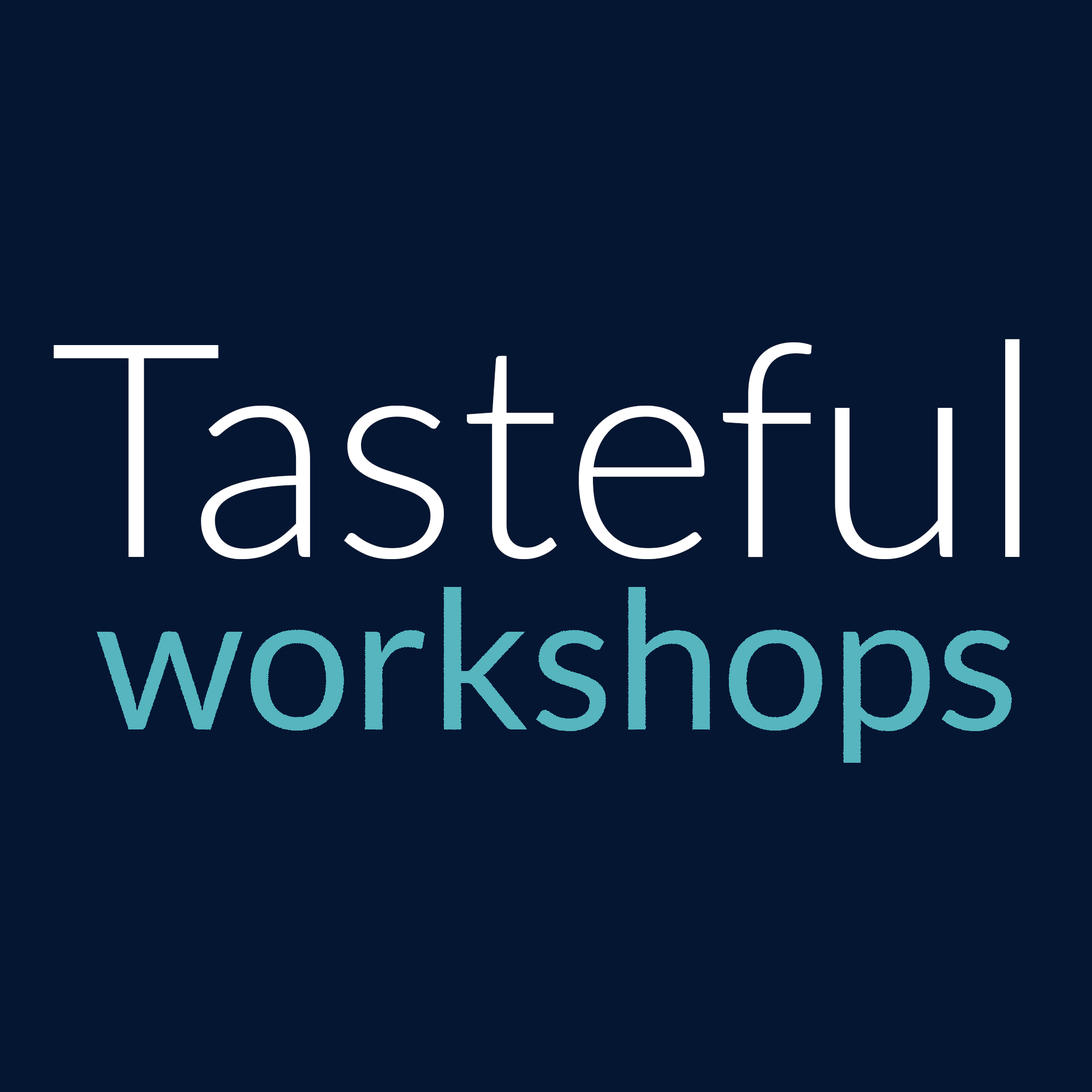
<style>
.page{position:relative;width:1092px;height:1092px;background:#051632}
.page>*{position:absolute;margin:0}
.t1{font:299px "Lato-Light";color:#ffffff}
.t2{font:193.4px "Lato-Regular";color:#56b5bf}
</style>
<div class="page">
<p class="t1" style="left:54px;top:339px;width:966px;height:220px">Tasteful</p>
<p class="t2" style="left:97px;top:587px;width:915px;height:176px">workshops</p>
</div>
